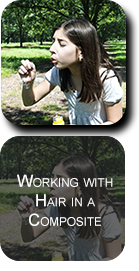
<style>
.page{position:relative;width:139px;height:271px}
.page>*{position:absolute;margin:0}
.t1{font:16.7px/19.4px "ArialMT";color:#ffffff;font-variant:small-caps}
</style>
<div class="page">
<p class="t1" style="left:17px;top:174px;width:96px;height:52px;text-align:center">Working with Hair in a Composite</p>
</div>
